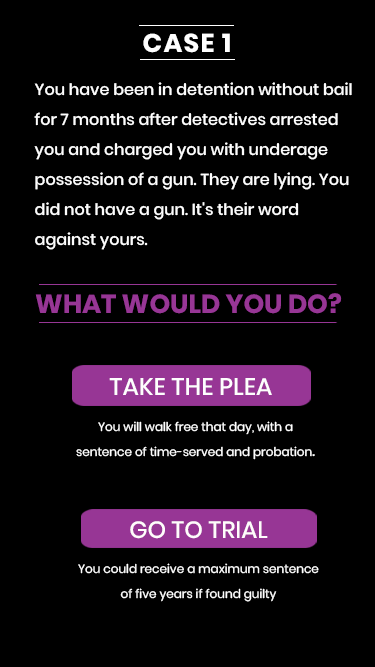
<style>
.page{position:relative;width:375px;height:667px;background:#000000}
.page>*{position:absolute;margin:0}
.t1{font:25.7px "Poppins-Bold";letter-spacing:0.05em;color:#ffffff}
.t2{font:16px/30px "Poppins-Medium";color:#fdfdfd}
.t3{font:26px "Poppins-Bold";color:#973695}
.t4{font:24px "Poppins-Medium";color:#fefefe}
.t5{font:12px/25.3px "Poppins-Regular";color:#ffffff}
.t6{font:16px/25.3px "Poppins-Regular";color:#ffffff}
.t7{font:23.6px "Poppins-Medium";color:#fffcfc}
.t8{font:12px/24.9px "Poppins-Regular";color:#ffffff}
</style>
<div class="page">
<p class="t1" style="left:143px;top:33px;width:87px;height:20px">CASE 1</p>
<p class="t2" style="left:34px;top:82px;width:318px;height:168px">You have been in detention without bail for 7 months after detectives arrested you and charged you with underage possession of a gun. They are lying. You did not have a gun. It's their word against yours.</p>
<p class="t3" style="left:35px;top:293px;width:307px;height:21px">WHAT WOULD YOU DO?</p>
<p class="t4" style="left:109px;top:378px;width:163px;height:17px">TAKE THE PLEA</p>
<p class="t5" style="left:76px;top:421px;width:239px;height:39px;text-align:center">You will walk free that day, with a<br>sentence of time-served and probation<span class="t6">.</span></p>
<p class="t7" style="left:130px;top:521px;width:138px;height:18px">GO TO TRIAL</p>
<p class="t8" style="left:78px;top:563px;width:241px;height:39px;text-align:center">You could receive a maximum sentence<br>of five years if found guilty</p>
</div>
